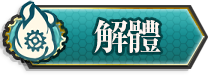
<style>
.page{position:relative;width:213px;height:75px}
.page>*{position:absolute;margin:0}
.t1{font:36px "RyuminPro-ExBold";letter-spacing:-0.08em;color:#fff6f1}
</style>
<div class="page">
<p class="t1" style="left:94px;top:19px;width:67px;height:34px">解體</p>
</div>
